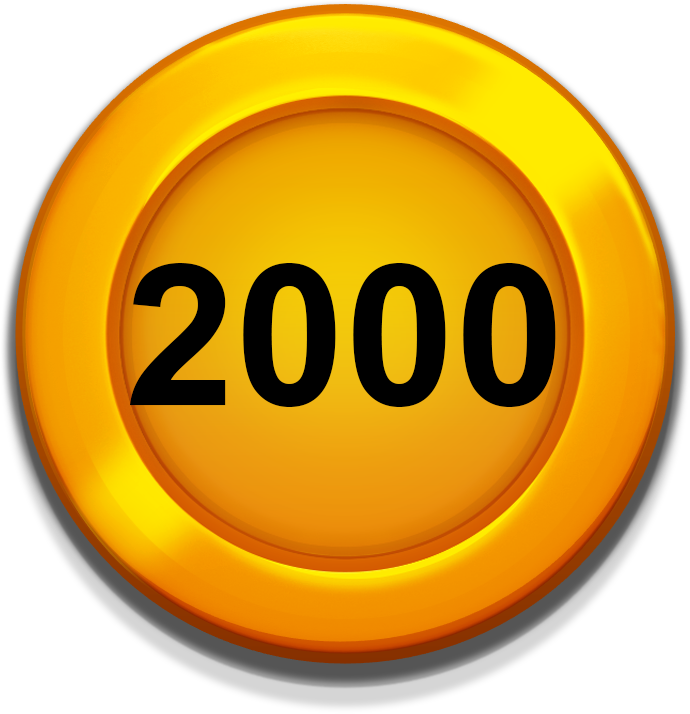
<style>
.page{position:relative;width:690px;height:714px;background:#ffffff}
.page>*{position:absolute;margin:0}
.t1{font:198.2px "Arial-BoldMT";color:#000000}
</style>
<div class="page">
<p class="t1" style="left:130px;top:263px;width:426px;height:144px">2000</p>
</div>
